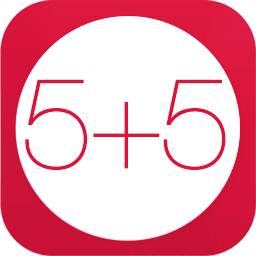
<style>
.page{position:relative;width:256px;height:256px;background:#ffffff}
.page>*{position:absolute;margin:0}
.t1{font:129.3px "HelveticaNeue-UltraLight";letter-spacing:-0.07em;color:#dc143c;font-weight:bold}
</style>
<div class="page">
<p class="t1" style="left:25px;top:79px;width:201px;height:91px">5+5</p>
</div>
